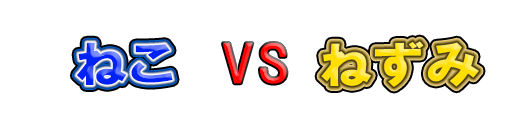
<style>
.page{position:relative;width:512px;height:128px;background:#ffffff}
.page>*{position:absolute;margin:0}
.t1{font:50px "HGPSoeiKakugothicUB";letter-spacing:0.04em;scale:1.11 1}
.t2{font:50px "HGPGothicE";letter-spacing:0.04em;scale:1.11 1}
</style>
<div class="page">
<p class="t1" style="left:321px;top:41px;width:158px;height:46px">ねずみ</p>
<p class="t1" style="left:76px;top:42px;width:97px;height:43px">ねこ</p>
<p class="t2" style="left:223px;top:43px;width:64px;height:41px">VS</p>
</div>
